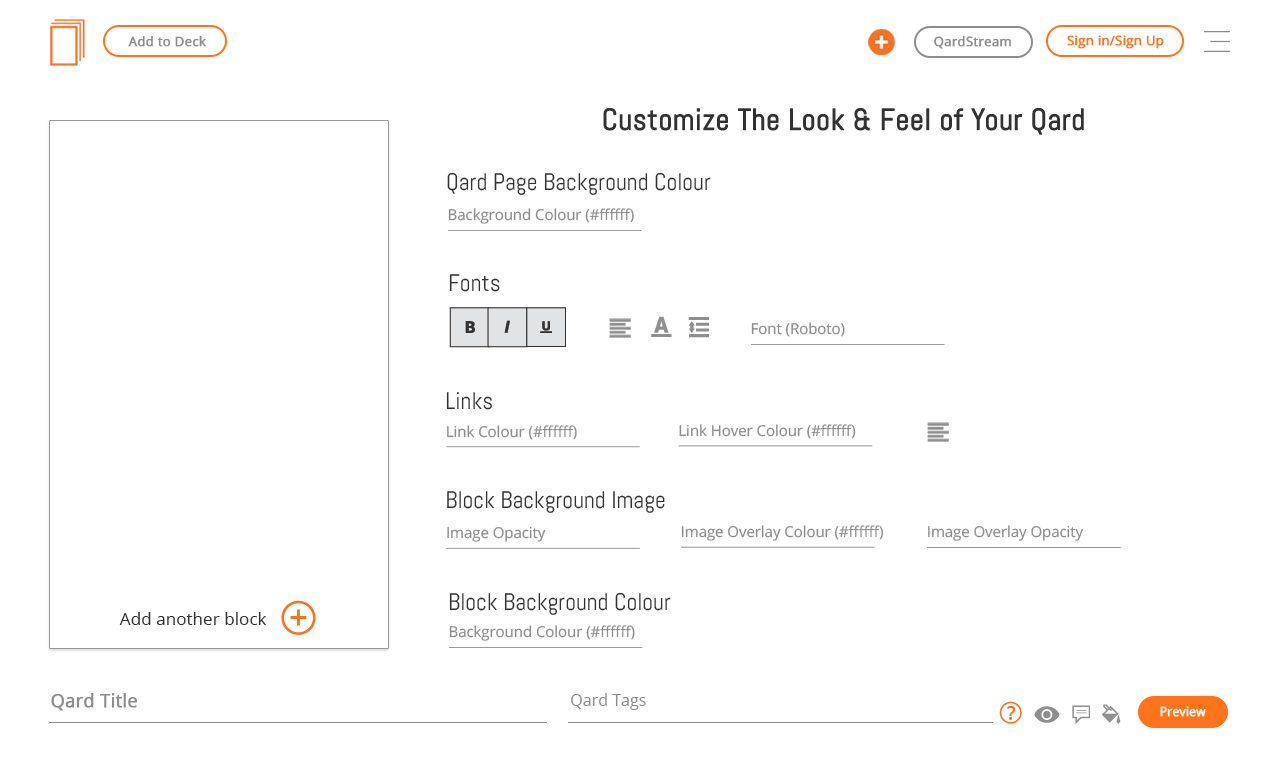
<style>
.page{position:relative;width:1280px;height:768px;background:#ffffff}
.page>*{position:absolute;margin:0}
.t1{font:13px "OpenSans";color:#8d8d8d;font-weight:bold}
.t2{font:13px "OpenSans";color:#ff741b;font-weight:bold}
.t3{font:30px "Abel-Regular";color:#323232;font-weight:bold}
.t4{font:24px "Abel-Regular";color:#323232}
.t5{font:15px "OpenSans";color:#8d8d8d}
.t6{font:17.1px "OpenSans";color:#323232}
.t7{font:18px "OpenSans";color:#8d8d8d;font-weight:bold}
.t8{font:16px "OpenSans";color:#8d8d8d}
.t9{font:13px "OpenSans";color:#ffffff;font-weight:bold;scale:0.93 1}
</style>
<div class="page">
<p class="t1" style="left:128px;top:35px;width:78px;height:12px">Add to Deck</p>
<p class="t1" style="left:934px;top:35px;width:77px;height:14px">QardStream</p>
<p class="t2" style="left:1067px;top:35px;width:97px;height:14px">Sign in/Sign Up</p>
<p class="t3" style="left:603px;top:108px;width:481px;height:27px">Customize The Look &amp; Feel of Your Qard</p>
<p class="t4" style="left:447px;top:172px;width:264px;height:23px">Qard Page Background Colour</p>
<p class="t5" style="left:448px;top:208px;width:186px;height:16px">Background Colour (#ffffff)</p>
<p class="t4" style="left:449px;top:274px;width:51px;height:18px">Fonts</p>
<p class="t5" style="left:751px;top:322px;width:94px;height:15px">Font (Roboto)</p>
<p class="t4" style="left:446px;top:392px;width:46px;height:18px">Links</p>
<p class="t5" style="left:447px;top:425px;width:130px;height:15px">Link Colour (#ffffff)</p>
<p class="t5" style="left:679px;top:424px;width:177px;height:15px">Link Hover Colour (#ffffff)</p>
<p class="t4" style="left:447px;top:491px;width:218px;height:22px">Block Background Image</p>
<p class="t5" style="left:447px;top:526px;width:99px;height:16px">Image Opacity</p>
<p class="t5" style="left:681px;top:525px;width:202px;height:16px">Image Overlay Colour (#ffffff)</p>
<p class="t5" style="left:928px;top:525px;width:156px;height:16px">Image Overlay Opacity</p>
<p class="t4" style="left:449px;top:592px;width:222px;height:23px">Block Background Colour</p>
<p class="t6" style="left:119px;top:612px;width:148px;height:13px">Add another block</p>
<p class="t5" style="left:449px;top:625px;width:186px;height:16px">Background Colour (#ffffff)</p>
<p class="t7" style="left:51px;top:693px;width:86px;height:18px">Qard Title</p>
<p class="t8" style="left:571px;top:693px;width:75px;height:17px">Qard Tags</p>
<p class="t9" style="left:1160px;top:706px;width:46px;height:11px">Preview</p>
</div>
